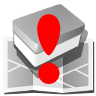
<style>
.page{position:relative;width:96px;height:96px;background:#ffffff}
.page>*{position:absolute;margin:0}
.t1{font:96px "CooperBlackStd";color:#ff0000}
</style>
<div class="page">
<p class="t1" style="left:37px;top:14px;width:24px;height:70px">!</p>
</div>
